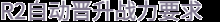
<style>
.page{position:relative;width:220px;height:22px;background:#000000}
.page>*{position:absolute;margin:0}
.t1{font:22px "WebPSD-18463539-0-Regular";color:#837a91;font-weight:bold}
</style>
<div class="page">
<p class="t1" style="left:0px;top:0px;width:220px;height:22px">R2自动晋升战力要求</p>
</div>
